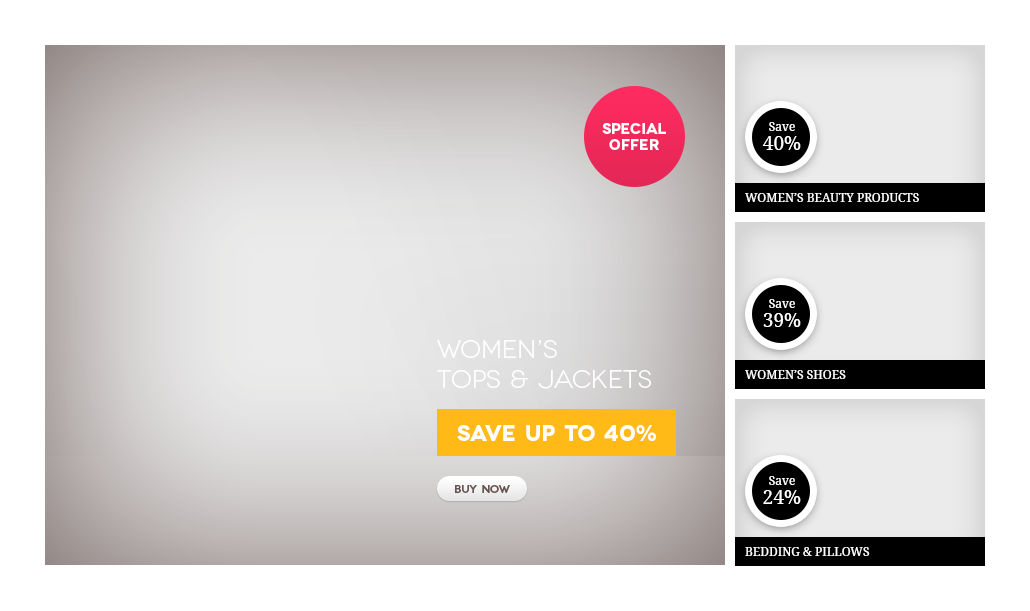
<style>
.page{position:relative;width:1030px;height:611px;background:#ffffff}
.page>*{position:absolute;margin:0}
.t1{font:15px/16px "Novecentowide-Bold";color:#ffffff}
.t2{font:12px/26px "DroidSerif";color:#ffffff}
.t3{font:19px/19px "DroidSerif";color:#ffffff}
.t4{font:12px "DroidSerif";color:#ffffff;text-transform:uppercase}
.t5{font:25px "Novecentowide-Book";color:#ffffff}
.t6{font:22px "Novecentowide-Bold";color:#ffffff}
.t7{font:11px "Novecentowide-DemiBold";color:#685551}
</style>
<div class="page">
<p class="t1" style="left:602px;top:123px;width:64px;height:27px;text-align:center">Special<br>offer</p>
<p class="t2" style="left:762px;top:122px;width:39px;height:28px;text-align:center">Save<br><span class="t3">40%</span></p>
<p class="t4" style="left:745px;top:193px;width:174px;height:9px">Women’s Beauty products</p>
<p class="t2" style="left:763px;top:299px;width:38px;height:28px;text-align:center">Save<br><span class="t3">39%</span></p>
<p class="t5" style="left:437px;top:340px;width:214px;height:49px">Women’s<br>tops &amp; jackets</p>
<p class="t4" style="left:745px;top:370px;width:101px;height:9px">Women’s shoes</p>
<p class="t6" style="left:457px;top:425px;width:199px;height:16px">save up to 40%</p>
<p class="t7" style="left:455px;top:485px;width:55px;height:8px">Buy now</p>
<p class="t2" style="left:763px;top:476px;width:38px;height:28px;text-align:center">Save<br><span class="t3">24%</span></p>
<p class="t4" style="left:745px;top:547px;width:125px;height:9px">Bedding &amp; Pillows</p>
</div>
